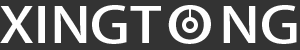
<style>
.page{position:relative;width:300px;height:50px;background:#333333}
.page>*{position:absolute;margin:0}
.t1{font:48px "AdobeHeitiStd-Regular";color:#fefefe;scale:1.2 1}
</style>
<div class="page">
<p class="t1" style="left:0px;top:5px;width:297px;height:39px">XINGTONG</p>
</div>
